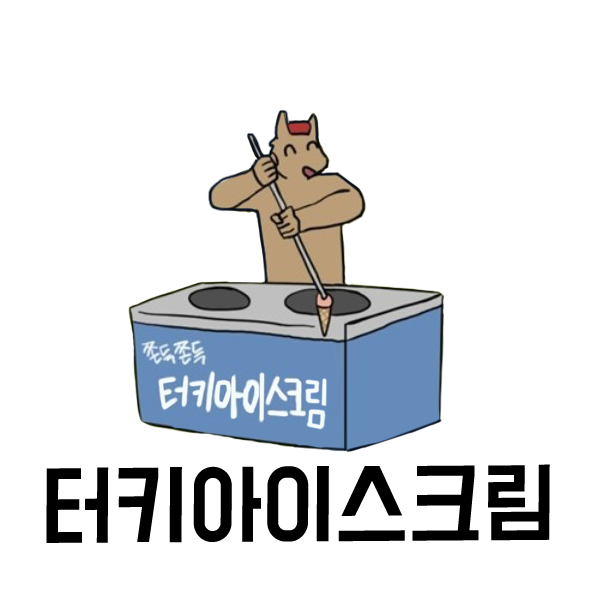
<style>
.page{position:relative;width:600px;height:600px;background:#ffffff}
.page>*{position:absolute;margin:0}
.t1{font:79.6px "BMDoHyeon";color:#000000;scale:0.96 1}
</style>
<div class="page">
<p class="t1" style="left:46px;top:464px;width:504px;height:79px">터키아이스크림</p>
</div>
